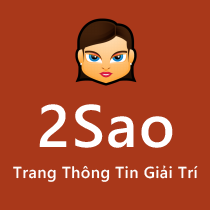
<style>
.page{position:relative;width:210px;height:210px;background:#a9381a}
.page>*{position:absolute;margin:0}
.t1{font:60px "SegoeWP-Semibold";letter-spacing:0.025em;color:#ffffff}
.t2{font:16px "SegoeWP-Semibold";letter-spacing:0.025em;color:#fefefe}
</style>
<div class="page">
<p class="t1" style="left:39px;top:104px;width:134px;height:44px">2Sao</p>
<p class="t2" style="left:13px;top:165px;width:185px;height:17px">Trang Thông Tin Giải Trí</p>
</div>
